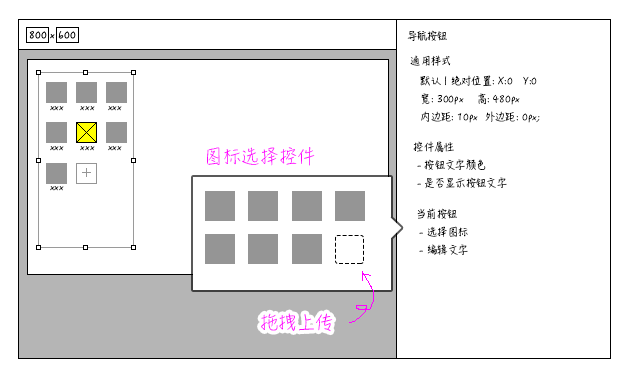
<style>
.page{position:relative;width:631px;height:380px;background:#ffffff}
.page>*{position:absolute;margin:0}
.t1{font:10px "HanziPenSC-W3";color:#000000}
.t2{font:10px/18px "HanziPenSC-W3";color:#000000}
.t3{font:10px/14px "HanziPenSC-W3";color:#000000}
.t4{font:10px/40px "HanziPenSC-W3";color:#000000}
.t5{font:18px "HanziPenSC-W3";color:#ff00ff}
</style>
<div class="page">
<p class="t1" style="left:407px;top:30px;width:40px;height:11px">导航按钮</p>
<p class="t1" style="left:410px;top:55px;width:41px;height:11px">通用样式</p>
<p class="t2" style="left:420px;top:75px;width:120px;height:48px"><span class="t3">默认 | 绝对位置: X:0   Y:0<br></span>宽: 300px    高: 480px<br>内边距: 10px  外边距: 0px;</p>
<p class="t4" style="left:50px;top:106px;width:72px;height:85px">xxx     xxx    xxx<br>xxx     xxx    xxx<br>xxx</p>
<p class="t5" style="left:207px;top:147px;width:108px;height:19px">图标选择控件</p>
<p class="t2" style="left:413px;top:141px;width:94px;height:48px">控件属性<br> - 按钮文字颜色<br> - 是否显示按钮文字</p>
<p class="t2" style="left:417px;top:208px;width:51px;height:47px">当前按钮<br> - 选择图标<br> - 编辑文字</p>
<p class="t5" style="left:261px;top:313px;width:72px;height:19px">拖拽上传</p>
</div>
